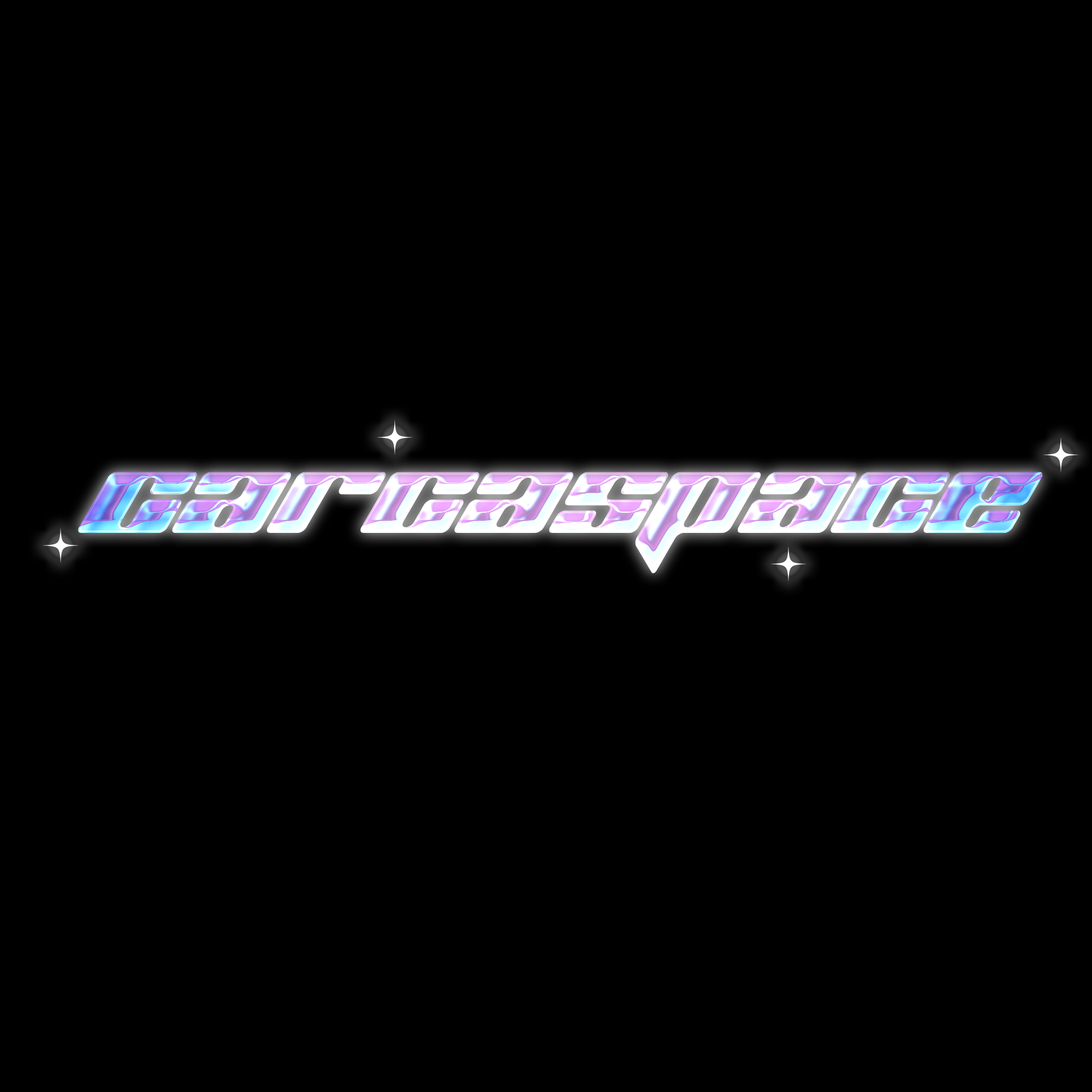
<style>
.page{position:relative;width:1092px;height:1092px;background:#000000}
.page>*{position:absolute;margin:0}
.t1{font:114.9px "PlanetKosmos"}
</style>
<div class="page">
<p class="t1" style="left:78px;top:472px;width:964px;height:101px">Carcaspace</p>
</div>
